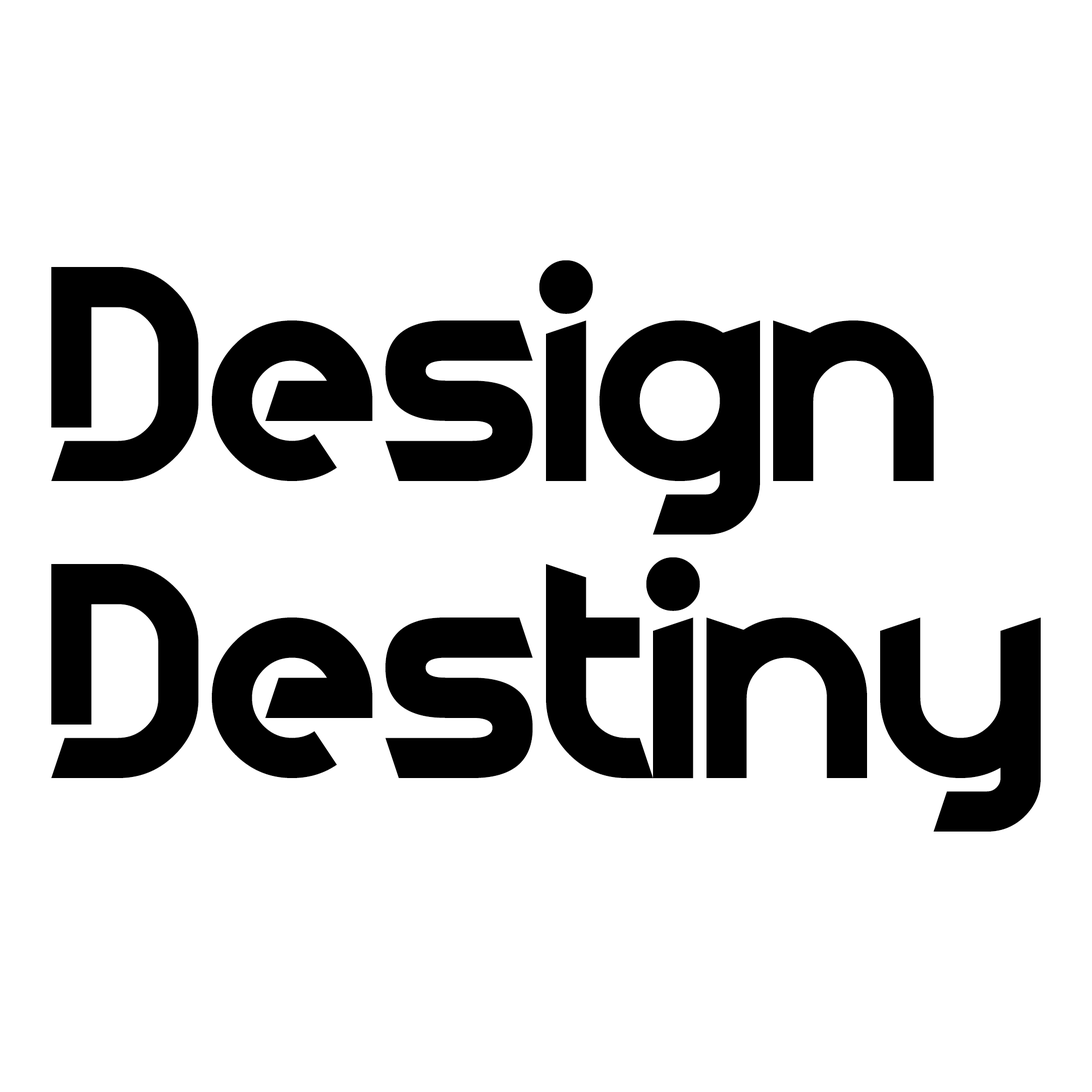
<style>
.page{position:relative;width:1092px;height:1092px;background:#ffffff}
.page>*{position:absolute;margin:0}
.t1{font:273.9px "FluidLighter";color:#000000}
</style>
<div class="page">
<p class="t1" style="left:51px;top:260px;width:883px;height:275px">Design</p>
<p class="t1" style="left:51px;top:557px;width:990px;height:275px">Destiny</p>
</div>
